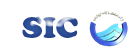
<style>
.page{position:relative;width:138px;height:54px;background:#ffffff}
.page>*{position:absolute;margin:0}
.t1{font:30px "CooperBlackStd";color:#2d4f97}
</style>
<div class="page">
<p class="t1" style="left:22px;top:16px;width:56px;height:22px">SIC</p>
</div>
